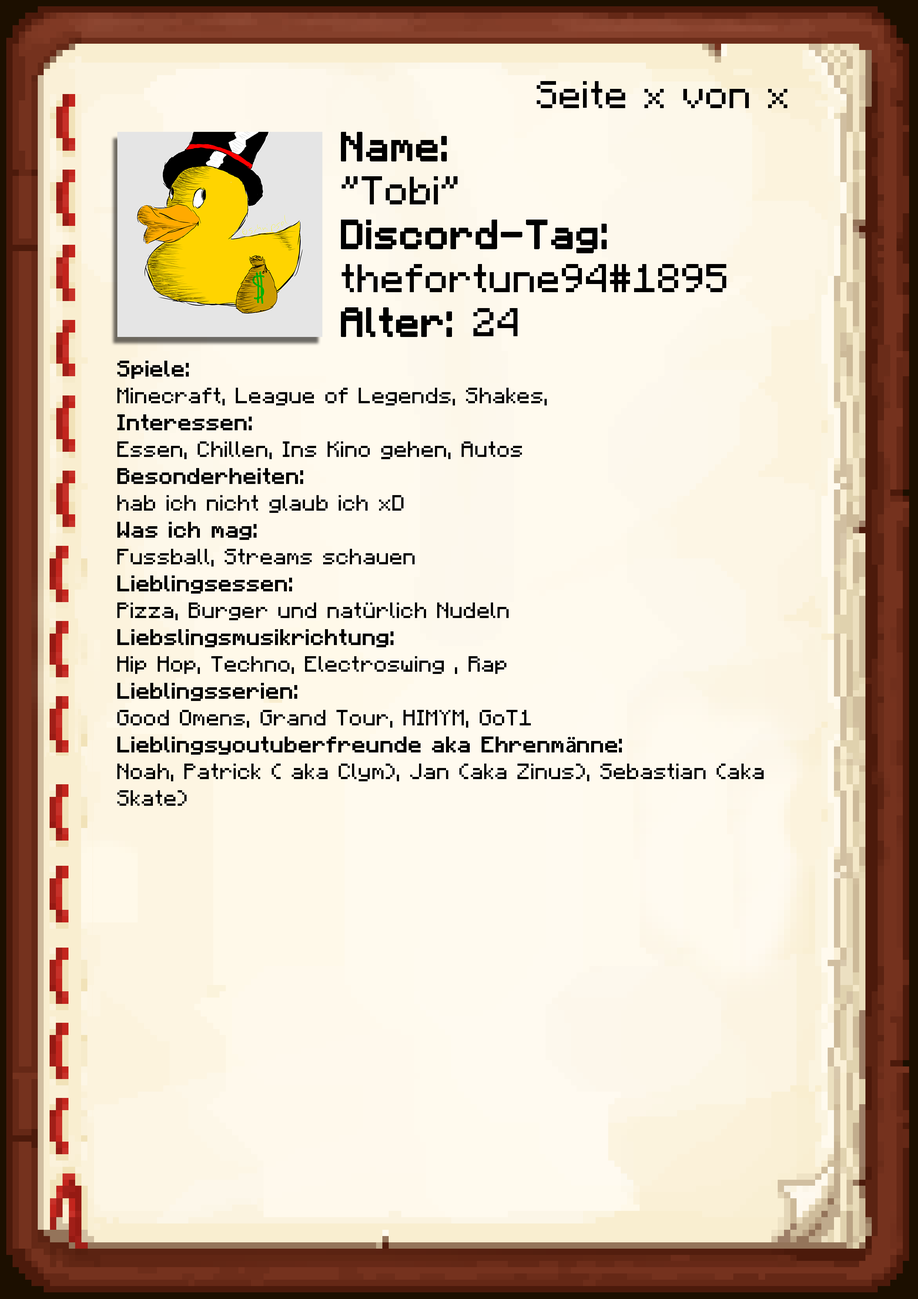
<style>
.page{position:relative;width:918px;height:1299px}
.page>*{position:absolute;margin:0}
.t1{font:38.6px "Minecraft-Regular";color:#000000}
.t2{font:40.1px/43.9px "Minecraft-Regular";color:#000000}
.t3{font:40.1px/43.9px "Minecraft-Regular";color:#000000;font-weight:bold}
.t4{font:22.4px "Minecraft-Regular";color:#000000}
.t5{font:22.4px "Minecraft-Regular";color:#000000;font-weight:bold}
.t6{font:22.4px "MyriadPro-Regular";color:#000000;font-weight:bold}
</style>
<div class="page">
<p class="t1" style="left:537px;top:81px;width:250px;height:27px">Seite x von x</p>
<p class="t2" style="left:341px;top:132px;width:385px;height:205px"><span class="t3">Name:<br></span>"Tobi"<br><span class="t3">Discord-Tag:<br></span>thefortune94#1895<br><span class="t3">Alter: </span>24</p>
<p class="t4" style="left:117px;top:361px;width:647px;height:445px"><span class="t5">Spiele: <br></span>Minecraft, League of Legends, Shakes,<br><span class="t5">Interessen:<br></span>Essen, Chillen, Ins Kino gehen, Autos<br><span class="t5">Besonderheiten:<br></span>hab ich nicht glaub ich xD<br><span class="t5">Was ich mag:<br></span>Fussball, Streams schauen<br><span class="t5">Lieblingsessen:<br></span>Pizza, Burger und natürlich Nudeln<br><span class="t5">Liebslingsmusikrichtung:<br></span>Hip Hop, Techno, Electroswing , Rap<br><span class="t5">Lieblingsserien:<br></span>Good Omens, Grand Tour, HIMYM, GoT1<br><span class="t5">Lieblingsyoutuberfreunde aka Ehrenm</span><span class="t6">ä</span><span class="t5">nne:<br></span>Noah, Patrick ( aka Clym), Jan (aka Zinus), Sebastian (aka Skate)</p>
</div>
